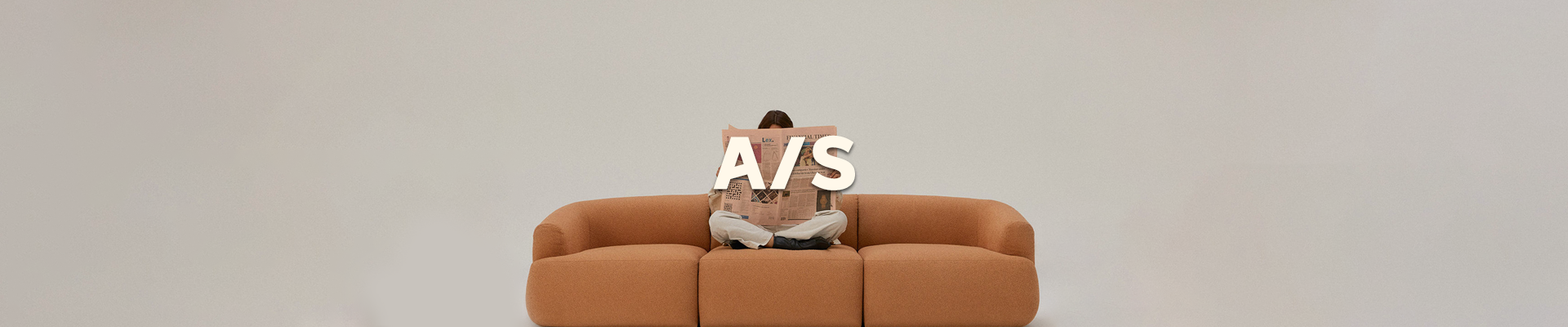
<style>
.page{position:relative;width:1568px;height:327px}
.page>*{position:absolute;margin:0}
.t1{font:65.3px "SBAggroB";letter-spacing:0.02em;color:#fff8ea;text-transform:uppercase}
</style>
<div class="page">
<p class="t1" style="left:713px;top:135px;width:142px;height:55px">A/s</p>
</div>
